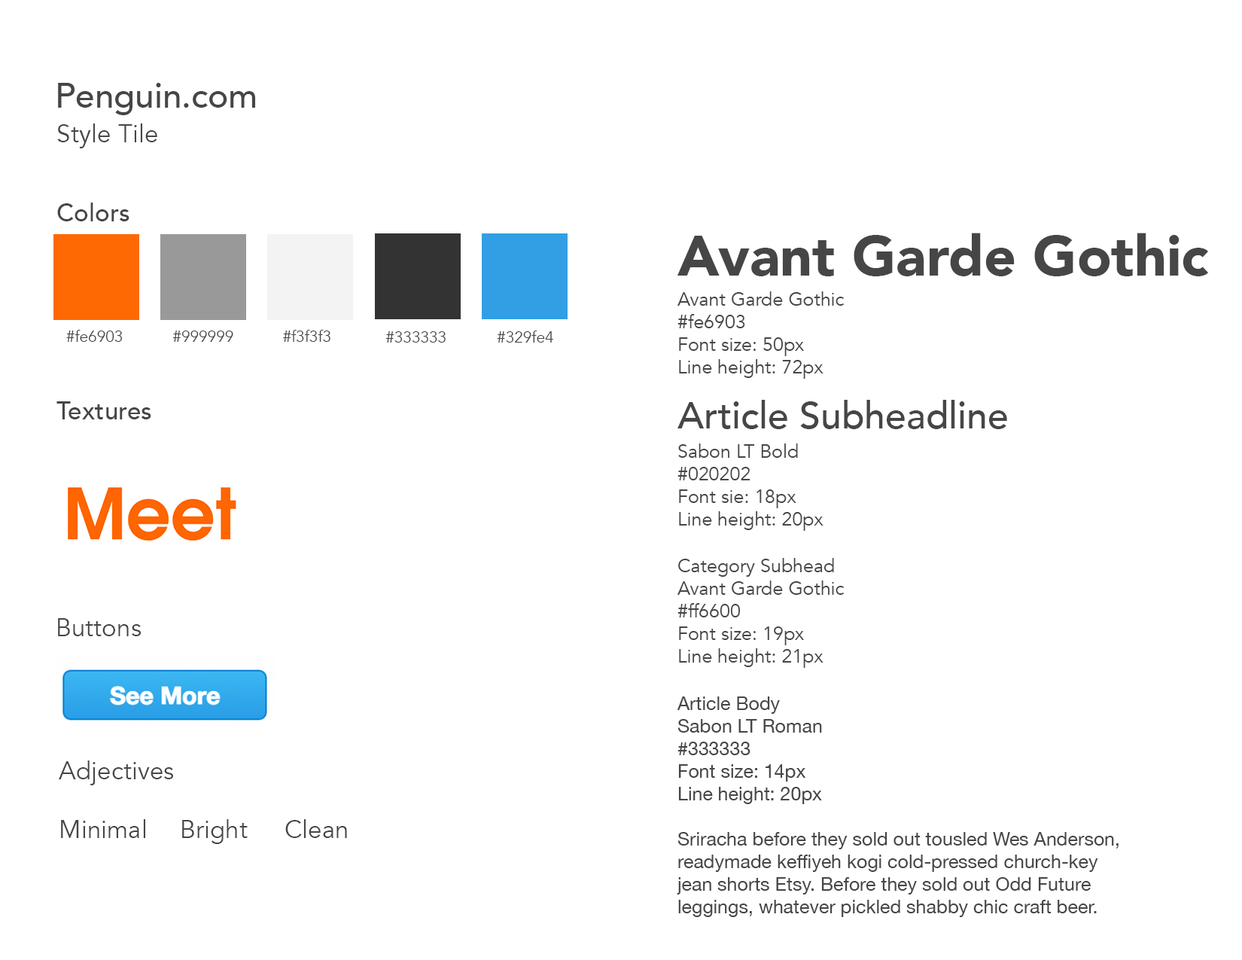
<style>
.page{position:relative;width:1242px;height:960px;background:#ffffff}
.page>*{position:absolute;margin:0}
.t1{font:34.5px "Avenir-Medium";color:#464646}
.t2{font:25.1px "Avenir-Book";color:#464646}
.t3{font:25.1px "Avenir-Medium";color:#464646}
.t4{font:56.5px "Avenir-Black";color:#464646}
.t5{font:18.8px "Avenir-Book";color:#464646}
.t6{font:15.7px "Avenir-Book";color:#464646}
.t7{font:37.6px "Avenir-Medium";color:#464646}
.t8{font:18.8px "HelveticaNeue";color:#464646}
</style>
<div class="page">
<p class="t1" style="left:58px;top:83px;width:197px;height:32px">Penguin.com</p>
<p class="t2" style="left:57px;top:123px;width:100px;height:25px">Style Tile</p>
<p class="t3" style="left:57px;top:203px;width:72px;height:18px">Colors</p>
<p class="t4" style="left:677px;top:233px;width:532px;height:43px">Avant Garde Gothic</p>
<p class="t5" style="left:678px;top:291px;width:167px;height:88px">Avant Garde Gothic<br>#fe6903<br>Font size: 50px<br>Line height: 72px<br>lin-height:</p>
<p class="t6" style="left:66px;top:330px;width:57px;height:12px">#fe6903</p>
<p class="t6" style="left:283px;top:330px;width:48px;height:12px">#f3f3f3</p>
<p class="t6" style="left:172px;top:331px;width:61px;height:11px">#999999</p>
<p class="t6" style="left:385px;top:331px;width:61px;height:12px">#333333</p>
<p class="t6" style="left:497px;top:331px;width:56px;height:12px">#329fe4</p>
<p class="t3" style="left:56px;top:401px;width:95px;height:18px">Textures</p>
<p class="t7" style="left:678px;top:400px;width:329px;height:29px">Article Subheadline</p>
<p class="t5" style="left:678px;top:443px;width:146px;height:88px">Sabon LT Bold<br>#020202<br>Font sie: 18px<br>Line height: 20px</p>
<p class="t5" style="left:678px;top:558px;width:167px;height:110px">Category Subhead<br>Avant Garde Gothic<br>#ff6600<br>Font size: 19px<br>Line height: 21px<br>line-height: 16px</p>
<p class="t2" style="left:58px;top:618px;width:83px;height:18px">Buttons</p>
<p class="t8" style="left:677px;top:696px;width:442px;height:221px">Article Body<br>Sabon LT Roman<br>#333333<br>Font size: 14px<br>Line height: 20px<br><br>Sriracha before they sold out tousled Wes Anderson, readymade keffiyeh kogi cold-pressed church-key jean shorts Etsy. Before they sold out Odd Future leggings, whatever pickled shabby chic craft beer.</p>
<p class="t2" style="left:59px;top:760px;width:114px;height:25px">Adjectives</p>
<p class="t2" style="left:61px;top:819px;width:84px;height:19px">Minimal</p>
<p class="t2" style="left:182px;top:819px;width:66px;height:25px">Bright</p>
<p class="t2" style="left:285px;top:819px;width:62px;height:19px">Clean</p>
</div>
